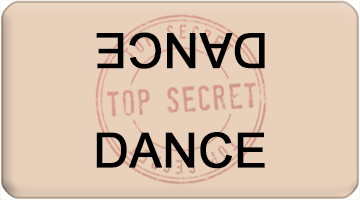
<style>
.page{position:relative;width:360px;height:200px;background:#e8d0bb}
.page>*{position:absolute;margin:0}
.t1{font:48px "ArialMT";color:#000000;font-weight:bold}
</style>
<div class="page">
<p class="t1" style="left:96px;top:32px;width:169px;height:37px;rotate:180deg">DANCE</p>
<p class="t1" style="left:96px;top:132px;width:169px;height:37px">DANCE</p>
</div>
